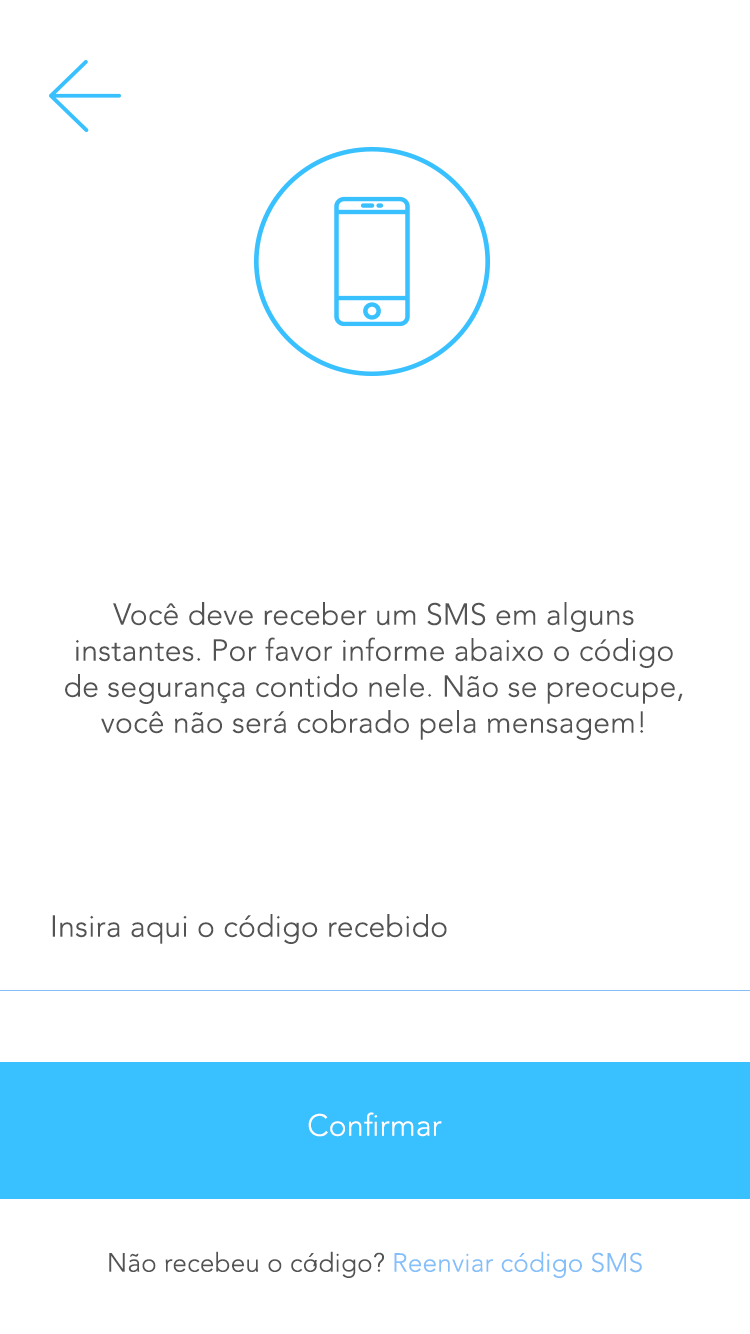
<style>
.page{position:relative;width:750px;height:1334px;background:#ffffff}
.page>*{position:absolute;margin:0}
.t1{font:30px "AvenirLTStd-Light";letter-spacing:0.01em;color:#535354}
.t2{font:30px "AvenirLTStd-Light";letter-spacing:0.01em;color:#ffffff}
.t3{font:26px "AvenirLTStd-Light";letter-spacing:0.01em;color:#535354}
.t4{font:26px "AvenirLTStd-Light";letter-spacing:0.01em;color:#84bffa}
</style>
<div class="page">
<p class="t1" style="left:65px;top:602px;width:618px;height:138px;text-align:center">Você deve receber um SMS em alguns <br>instantes. Por favor informe abaixo o código <br>de segurança contido nele. Não se preocupe, você não será cobrado pela mensagem!</p>
<p class="t1" style="left:52px;top:914px;width:395px;height:30px">Insira aqui o código recebido</p>
<p class="t2" style="left:308px;top:1112px;width:134px;height:25px">Confirmar</p>
<p class="t3" style="left:109px;top:1251px;width:533px;height:27px">Não recebeu o código? <span class="t4">Reenviar código SMS</span></p>
<p class="t3" style="left:313px;top:1260px;width:4px;height:7px">‘</p>
</div>
